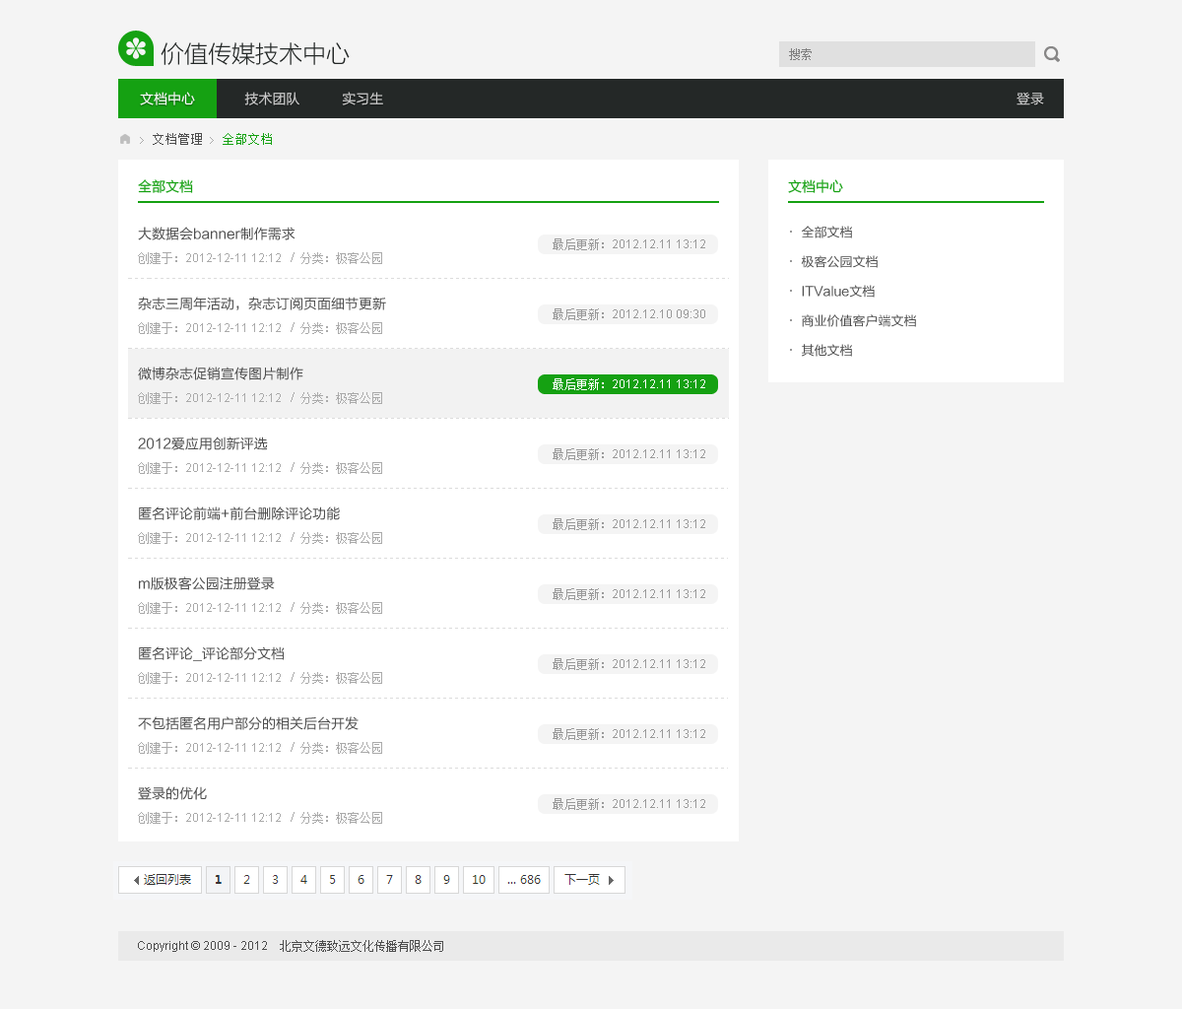
<style>
.page{position:relative;width:1182px;height:1009px;background:#f4f4f4}
.page>*{position:absolute;margin:0}
.t1{font:23.6px "FZLTXHK--GBK1-0";color:#242827}
.t2{font:11.8px "SimSun";color:#7f7f7f}
.t3{font:13.8px "FZLTHJW--GB1-0";color:#cccccc}
.t4{font:13.8px "FZLTHJW--GB1-0";color:#ffffff}
.t5{font:13.8px "FZLTHJW--GB1-0";color:#dddddd}
.t6{font:12.8px "SimSun";color:#4d4d4d}
.t7{font:9.9px "SimSun";color:#aaaaaa}
.t8{font:12.8px "SimSun";color:#15a112}
.t9{font:13.8px "FZLTHJW--GB1-0";color:#15a112}
.t10{font:13.8px "FZLTHJW--GB1-0";color:#4d4d4d}
.t11{font:12.8px/29.6px "FZLTHJW--GB1-0";color:#4d4d4d}
.t12{font:11.8px "ArialMT";color:#999999}
.t13{font:11.8px "SimSun";color:#999999}
.t14{font:11.8px "ArialMT";color:#aaaaaa}
.t15{font:11.8px "SimSun";color:#aaaaaa}
.t16{font:11.8px "AdobeHeitiStd-Regular";color:#aaaaaa}
.t17{font:11.8px "ArialMT";color:#ffffff}
.t18{font:11.8px "SimSun";color:#ffffff}
.t19{font:11.8px "ArialMT";color:#4d4d4d}
.t20{font:11.8px "SimSun";color:#4d4d4d}
</style>
<div class="page">
<p class="t1" style="left:161px;top:42px;width:189px;height:23px">价值传媒技术中心</p>
<p class="t2" style="left:789px;top:48px;width:23px;height:12px">搜索</p>
<p class="t3" style="left:140px;top:92px;width:243px;height:13px"><span class="t4">文档中心             </span>技术团队           实习生</p>
<p class="t5" style="left:1017px;top:92px;width:27px;height:13px">登录</p>
<p class="t6" style="left:140px;top:133px;width:132px;height:12px"><span class="t7">&gt;</span> 文档管理 <span class="t7">&gt;</span><span class="t8"> 全部文档</span></p>
<p class="t9" style="left:138px;top:179px;width:55px;height:14px">全部文档</p>
<p class="t9" style="left:788px;top:179px;width:55px;height:14px">文档中心</p>
<p class="t10" style="left:138px;top:227px;width:158px;height:13px">大数据会banner制作需求</p>
<p class="t11" style="left:801px;top:226px;width:115px;height:131px">全部文档<br>极客公园文档<br>ITValue文档<br>商业价值客户端文档<br>其他文档</p>
<p class="t12" style="left:553px;top:238px;width:152px;height:12px"><span class="t13">最后更新：</span>2012.12.11 13:12</p>
<p class="t14" style="left:138px;top:252px;width:244px;height:12px"><span class="t15">创建于：</span>2012-12-11 12:12   <span class="t16">/  </span><span class="t15">分类：极客公园</span></p>
<p class="t10" style="left:138px;top:297px;width:248px;height:13px">杂志三周年活动，杂志订阅页面细节更新</p>
<p class="t12" style="left:553px;top:308px;width:152px;height:12px"><span class="t13">最后更新：</span>2012.12.10 09:30</p>
<p class="t14" style="left:138px;top:322px;width:244px;height:12px"><span class="t15">创建于：</span>2012-12-11 12:12   <span class="t16">/  </span><span class="t15">分类：极客公园</span></p>
<p class="t10" style="left:138px;top:366px;width:165px;height:14px">微博杂志促销宣传图片制作</p>
<p class="t17" style="left:553px;top:378px;width:152px;height:12px"><span class="t18">最后更新：</span>2012.12.11 13:12</p>
<p class="t14" style="left:138px;top:392px;width:244px;height:12px"><span class="t15">创建于：</span>2012-12-11 12:12   <span class="t16">/  </span><span class="t15">分类：极客公园</span></p>
<p class="t10" style="left:138px;top:436px;width:130px;height:14px">2012爱应用创新评选</p>
<p class="t12" style="left:553px;top:448px;width:152px;height:12px"><span class="t13">最后更新：</span>2012.12.11 13:12</p>
<p class="t14" style="left:138px;top:462px;width:244px;height:12px"><span class="t15">创建于：</span>2012-12-11 12:12   <span class="t16">/  </span><span class="t15">分类：极客公园</span></p>
<p class="t10" style="left:139px;top:506px;width:201px;height:14px">匿名评论前端+前台删除评论功能</p>
<p class="t12" style="left:553px;top:518px;width:152px;height:12px"><span class="t13">最后更新：</span>2012.12.11 13:12</p>
<p class="t14" style="left:138px;top:532px;width:244px;height:12px"><span class="t15">创建于：</span>2012-12-11 12:12   <span class="t16">/  </span><span class="t15">分类：极客公园</span></p>
<p class="t10" style="left:139px;top:576px;width:136px;height:14px">m版极客公园注册登录</p>
<p class="t12" style="left:553px;top:588px;width:152px;height:12px"><span class="t13">最后更新：</span>2012.12.11 13:12</p>
<p class="t14" style="left:138px;top:602px;width:244px;height:12px"><span class="t15">创建于：</span>2012-12-11 12:12   <span class="t16">/  </span><span class="t15">分类：极客公园</span></p>
<p class="t10" style="left:139px;top:646px;width:146px;height:15px">匿名评论_评论部分文档</p>
<p class="t12" style="left:553px;top:658px;width:152px;height:12px"><span class="t13">最后更新：</span>2012.12.11 13:12</p>
<p class="t14" style="left:138px;top:672px;width:244px;height:12px"><span class="t15">创建于：</span>2012-12-11 12:12   <span class="t16">/  </span><span class="t15">分类：极客公园</span></p>
<p class="t10" style="left:138px;top:716px;width:221px;height:14px">不包括匿名用户部分的相关后台开发</p>
<p class="t12" style="left:553px;top:728px;width:152px;height:12px"><span class="t13">最后更新：</span>2012.12.11 13:12</p>
<p class="t14" style="left:138px;top:742px;width:244px;height:12px"><span class="t15">创建于：</span>2012-12-11 12:12   <span class="t16">/  </span><span class="t15">分类：极客公园</span></p>
<p class="t10" style="left:138px;top:786px;width:69px;height:14px">登录的优化</p>
<p class="t12" style="left:553px;top:798px;width:152px;height:12px"><span class="t13">最后更新：</span>2012.12.11 13:12</p>
<p class="t14" style="left:138px;top:812px;width:244px;height:12px"><span class="t15">创建于：</span>2012-12-11 12:12   <span class="t16">/  </span><span class="t15">分类：极客公园</span></p>
<p class="t19" style="left:138px;top:940px;width:305px;height:12px">Copyright © 2009 - 2012    <span class="t20">北京文德致远文化传播有限公司</span></p>
</div>
